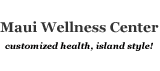
<style>
.page{position:relative;width:160px;height:71px;background:#ffffff}
.page>*{position:absolute;margin:0}
.t1{font:14px "Georgia-Bold";color:#333333}
.t2{font:9px "Georgia-BoldItalic";color:#010000}
</style>
<div class="page">
<p class="t1" style="left:0px;top:21px;width:159px;height:12px">Maui Wellness Center</p>
<p class="t2" style="left:5px;top:42px;width:148px;height:9px">customized health, island style!</p>
</div>
